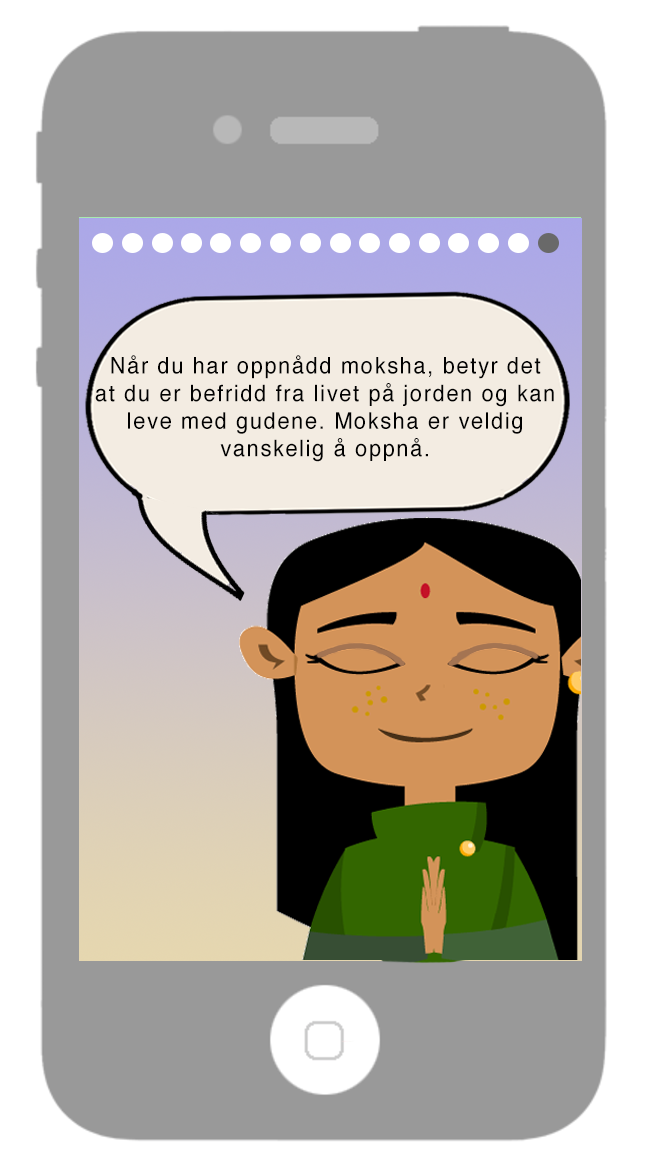
<style>
.page{position:relative;width:646px;height:1172px;background:#999999}
.page>*{position:absolute;margin:0}
.t1{font:11px "Helvetica";letter-spacing:0.075em;color:#010101;scale:0.95 1}
</style>
<div class="page">
<p class="t1" style="left:95px;top:355px;width:459px;height:107px;text-align:center">Når du har oppnådd moksha, betyr det<br>at du er befridd fra livet på jorden og kan<br>leve med gudene. Moksha er veldig<br>vanskelig å oppnå.</p>
</div>
